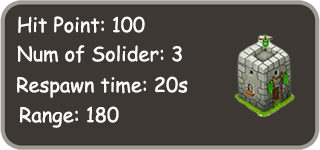
<style>
.page{position:relative;width:320px;height:150px;background:#3d3833}
.page>*{position:absolute;margin:0}
.t1{font:20px "ComicSansMS";color:#fefefe}
</style>
<div class="page">
<p class="t1" style="left:18px;top:16px;width:127px;height:17px">Hit Point: 100</p>
<p class="t1" style="left:17px;top:45px;width:165px;height:18px">Num of Solider: 3</p>
<p class="t1" style="left:17px;top:76px;width:171px;height:22px">Respawn time: 20s</p>
<p class="t1" style="left:20px;top:106px;width:99px;height:22px">Range: 180</p>
</div>
